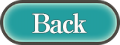
<style>
.page{position:relative;width:120px;height:45px}
.page>*{position:absolute;margin:0}
.t1{font:26px "RyuminPro-ExBold";letter-spacing:-0.08em;color:#fdfbf9}
</style>
<div class="page">
<p class="t1" style="left:32px;top:13px;width:55px;height:21px">Back</p>
</div>
